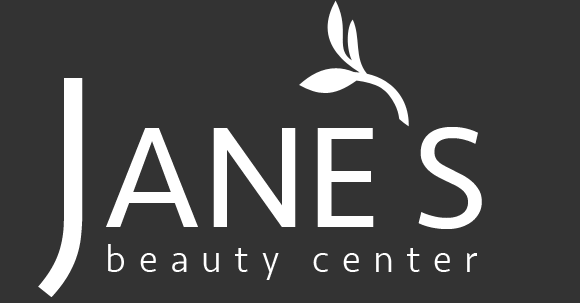
<style>
.page{position:relative;width:580px;height:303px;background:#333333}
.page>*{position:absolute;margin:0}
.t1{font:266.7px "Seravek-Light";color:#ffffff;text-transform:uppercase}
.t2{font:147.7px "Seravek";color:#ffffff;text-transform:uppercase}
.t3{font:39.3px "Seravek-Light";letter-spacing:0.31em;color:#ffffff}
</style>
<div class="page">
<p class="t1" style="left:38px;top:78px;width:45px;height:219px">J</p>
<p class="t2" style="left:106px;top:127px;width:376px;height:102px">ane s</p>
<p class="t3" style="left:108px;top:244px;width:369px;height:36px">beauty center</p>
</div>
